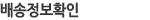
<style>
.page{position:relative;width:150px;height:20px;background:#ffffff}
.page>*{position:absolute;margin:0}
.t1{font:15.5px "NanumGothicBold";letter-spacing:-0.025em;color:#383837;text-transform:uppercase;scale:0.93 1}
</style>
<div class="page">
<p class="t1" style="left:0px;top:2px;width:79px;height:16px">배송정보확인</p>
</div>
